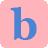
<style>
.page{position:relative;width:48px;height:48px;background:#ffb3ba}
.page>*{position:absolute;margin:0}
.t1{font:41.5px "Georgia-Bold";color:#4b84d2}
</style>
<div class="page">
<p class="t1" style="left:10px;top:7px;width:27px;height:33px">b</p>
</div>
